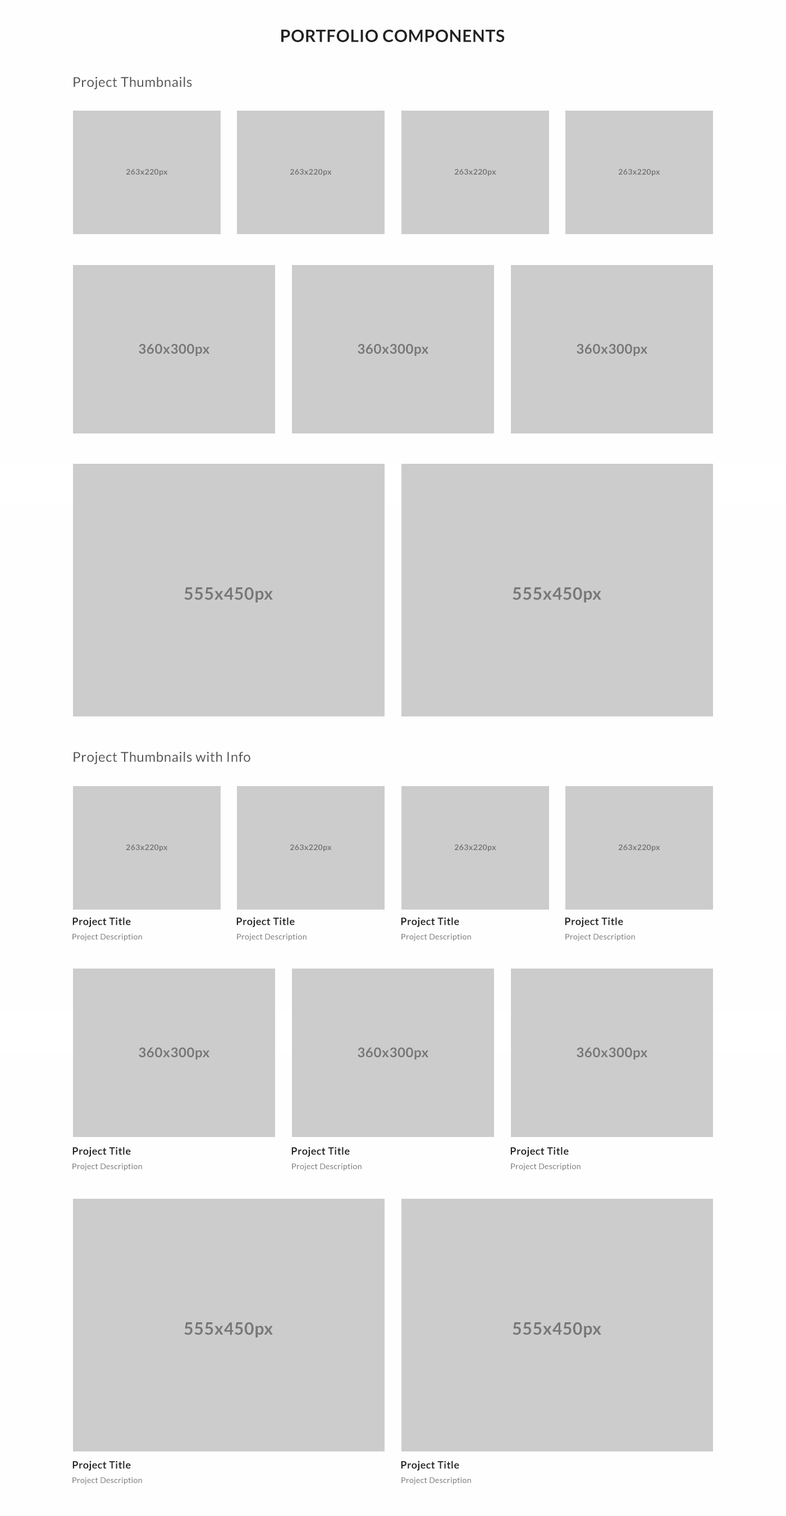
<style>
.page{position:relative;width:786px;height:1516px;background:#cccccc}
.page>*{position:absolute;margin:0}
.t1{font:16.8px "Lato-Bold";letter-spacing:0.025em;color:#222222}
.t2{font:13.5px "Lato-Regular";letter-spacing:0.025em;color:#555555}
.t3{font:7.9px "Lato-Bold";letter-spacing:0.025em;color:#777777}
.t4{font:13.5px "Lato-Bold";letter-spacing:0.025em;color:#777777}
.t5{font:16.8px "Lato-Bold";letter-spacing:0.025em;color:#777777}
.t6{font:10.1px "Lato-Bold";letter-spacing:0.025em;color:#222222}
.t7{font:7.9px "Lato-Regular";letter-spacing:0.025em;color:#777777}
</style>
<div class="page">
<p class="t1" style="left:281px;top:29px;width:224px;height:13px">PORTFOLIO COMPONENTS</p>
<p class="t2" style="left:74px;top:77px;width:118px;height:12px">Project Thumbnails</p>
<p class="t3" style="left:126px;top:169px;width:42px;height:7px">263x220px</p>
<p class="t3" style="left:290px;top:169px;width:42px;height:7px">263x220px</p>
<p class="t3" style="left:454px;top:169px;width:43px;height:7px">263x220px</p>
<p class="t3" style="left:618px;top:169px;width:43px;height:7px">263x220px</p>
<p class="t4" style="left:139px;top:344px;width:70px;height:12px">360x300px</p>
<p class="t4" style="left:358px;top:344px;width:71px;height:12px">360x300px</p>
<p class="t4" style="left:577px;top:344px;width:71px;height:12px">360x300px</p>
<p class="t5" style="left:184px;top:587px;width:89px;height:16px">555x450px</p>
<p class="t5" style="left:513px;top:587px;width:89px;height:16px">555x450px</p>
<p class="t2" style="left:74px;top:752px;width:176px;height:12px">Project Thumbnails with Info</p>
<p class="t3" style="left:126px;top:845px;width:42px;height:7px">263x220px</p>
<p class="t3" style="left:290px;top:845px;width:42px;height:7px">263x220px</p>
<p class="t3" style="left:454px;top:845px;width:43px;height:7px">263x220px</p>
<p class="t3" style="left:618px;top:845px;width:43px;height:7px">263x220px</p>
<p class="t6" style="left:72px;top:918px;width:59px;height:9px">Project Title</p>
<p class="t6" style="left:236px;top:918px;width:59px;height:9px">Project Title</p>
<p class="t6" style="left:401px;top:918px;width:58px;height:9px">Project Title</p>
<p class="t6" style="left:565px;top:918px;width:58px;height:9px">Project Title</p>
<p class="t7" style="left:72px;top:934px;width:70px;height:7px">Project Description</p>
<p class="t7" style="left:237px;top:934px;width:70px;height:7px">Project Description</p>
<p class="t7" style="left:402px;top:934px;width:69px;height:7px">Project Description</p>
<p class="t7" style="left:566px;top:934px;width:69px;height:7px">Project Description</p>
<p class="t4" style="left:139px;top:1047px;width:70px;height:13px">360x300px</p>
<p class="t4" style="left:358px;top:1047px;width:71px;height:13px">360x300px</p>
<p class="t4" style="left:577px;top:1047px;width:71px;height:13px">360x300px</p>
<p class="t6" style="left:72px;top:1147px;width:59px;height:10px">Project Title</p>
<p class="t6" style="left:291px;top:1147px;width:59px;height:10px">Project Title</p>
<p class="t6" style="left:511px;top:1147px;width:58px;height:10px">Project Title</p>
<p class="t7" style="left:72px;top:1164px;width:70px;height:7px">Project Description</p>
<p class="t7" style="left:292px;top:1164px;width:70px;height:7px">Project Description</p>
<p class="t7" style="left:511px;top:1164px;width:70px;height:7px">Project Description</p>
<p class="t5" style="left:184px;top:1323px;width:89px;height:15px">555x450px</p>
<p class="t5" style="left:513px;top:1323px;width:89px;height:15px">555x450px</p>
<p class="t6" style="left:72px;top:1461px;width:59px;height:10px">Project Title</p>
<p class="t6" style="left:401px;top:1461px;width:58px;height:10px">Project Title</p>
<p class="t7" style="left:72px;top:1478px;width:70px;height:7px">Project Description</p>
<p class="t7" style="left:402px;top:1478px;width:69px;height:7px">Project Description</p>
</div>
